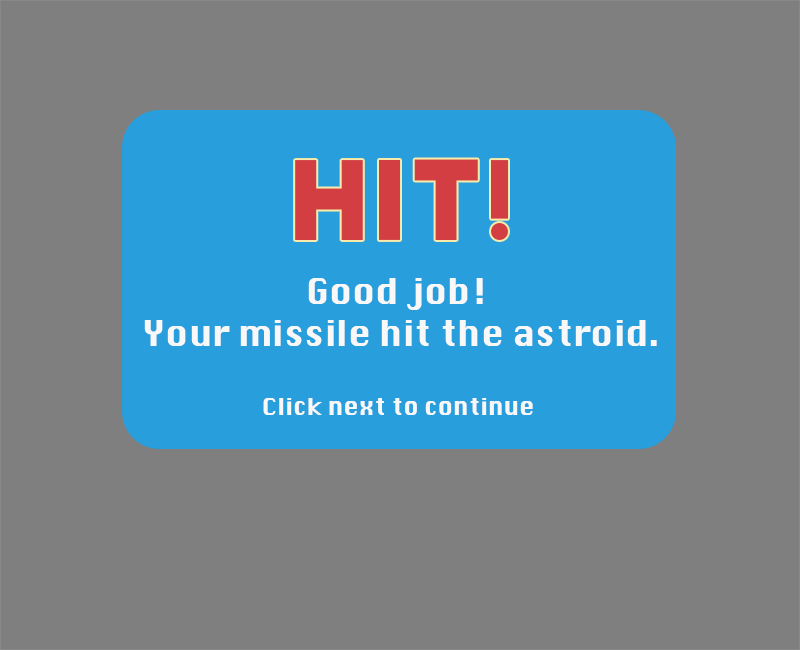
<style>
.page{position:relative;width:800px;height:650px;background:#7f7f7f}
.page>*{position:absolute;margin:0}
.t1{font:107px "BigJohn";color:#d33e43}
.t2{font:34.8px "Krungthep";color:#f9f8f9}
.t3{font:23.3px "Krungthep";color:#f9f8f9}
</style>
<div class="page">
<p class="t1" style="left:295px;top:159px;width:213px;height:81px">HIT!</p>
<p class="t2" style="left:144px;top:278px;width:513px;height:137px;text-align:center">Good job! <br>Your missile hit the astroid.<br><br><span class="t3">Click next to continue</span></p>
</div>
